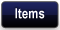
<style>
.page{position:relative;width:60px;height:30px}
.page>*{position:absolute;margin:0}
.t1{font:14px "ArialNarrow-Bold";color:#ffffff}
</style>
<div class="page">
<p class="t1" style="left:15px;top:8px;width:30px;height:11px">Items</p>
</div>
